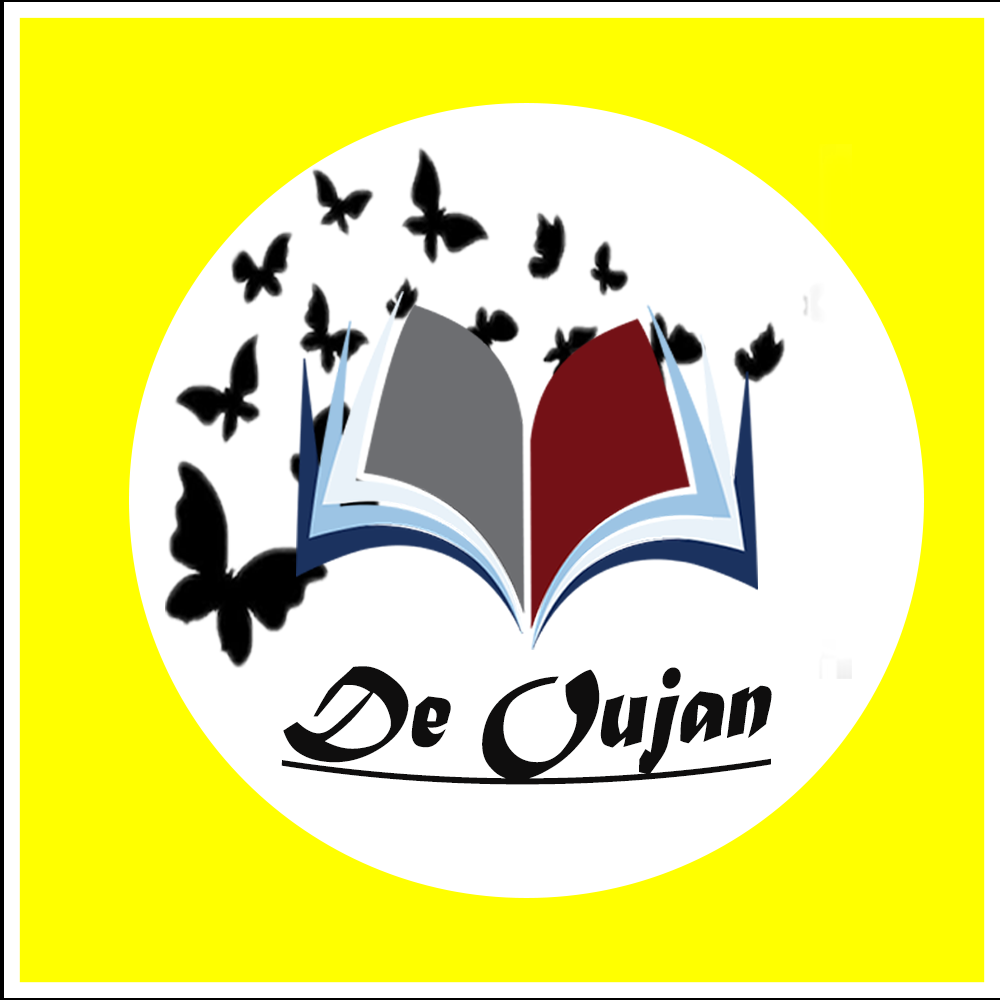
<style>
.page{position:relative;width:1000px;height:1000px;background:#ffff00}
.page>*{position:absolute;margin:0}
.t1{font:98.8px "MaturaMTScriptCapitals";color:#0f0e0e;font-style:italic;text-decoration:underline}
</style>
<div class="page">
<p class="t1" style="left:281px;top:666px;width:491px;height:119px">De Oujan</p>
</div>
